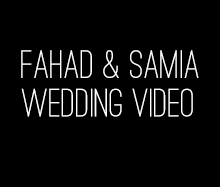
<style>
.page{position:relative;width:220px;height:187px;background:#000000}
.page>*{position:absolute;margin:0}
.t1{font:41.3px "OstrichSans-Medium";color:#ffffff}
</style>
<div class="page">
<p class="t1" style="left:21px;top:50px;width:178px;height:28px">Fahad &amp; Samia</p>
<p class="t1" style="left:21px;top:88px;width:172px;height:29px">Wedding Video</p>
</div>
